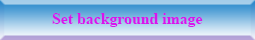
<style>
.page{position:relative;width:255px;height:40px}
.page>*{position:absolute;margin:0}
.t1{font:15.8px "TimesNewRomanPS-BoldMT";color:#d815ed}
</style>
<div class="page">
<p class="t1" style="left:52px;top:13px;width:151px;height:14px">Set background image</p>
</div>
